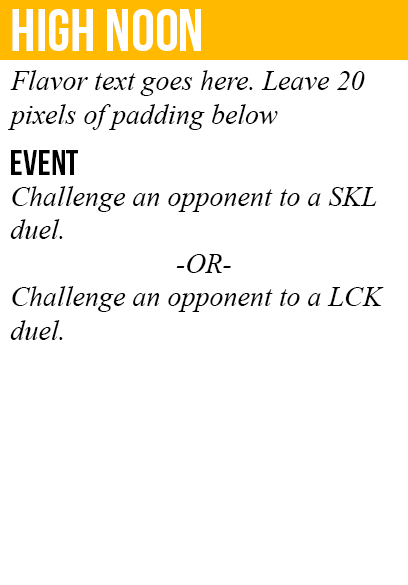
<style>
.page{position:relative;width:408px;height:585px;background:#ffffff}
.page>*{position:absolute;margin:0}
.t1{font:60px "BebasNeue";color:#ffffff}
.t2{font:28px "TimesNewRomanPS-ItalicMT";color:#000000}
.t3{font:36px "BebasNeue";color:#000000}
</style>
<div class="page">
<p class="t1" style="left:12px;top:9px;width:189px;height:42px">high noon</p>
<p class="t2" style="left:8px;top:70px;width:357px;height:60px">Flavor text goes here. Leave 20<br>pixels of padding below</p>
<p class="t3" style="left:11px;top:150px;width:67px;height:25px">event</p>
<p class="t2" style="left:10px;top:186px;width:374px;height:154px">Challenge an opponent to a SKL<br>duel.<br><br>Challenge an opponent to a LCK<br>duel.</p>
<p class="t2" style="left:176px;top:254px;width:55px;height:19px">-OR-</p>
</div>
